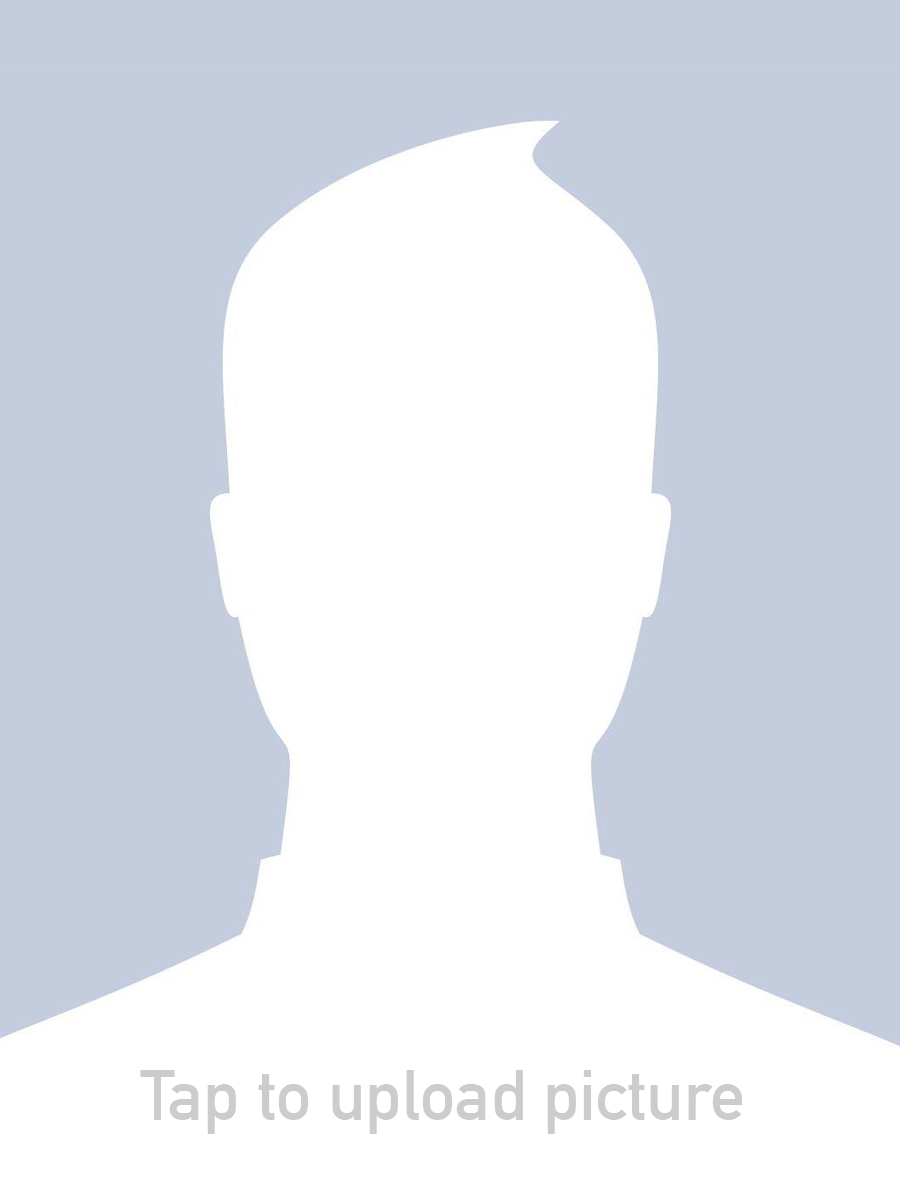
<style>
.page{position:relative;width:900px;height:1200px;background:#c4ccde}
.page>*{position:absolute;margin:0}
.t1{font:70px "DINAlternate-Bold";color:#cccccc}
</style>
<div class="page">
<p class="t1" style="left:140px;top:1070px;width:603px;height:64px">Tap to upload picture</p>
</div>
